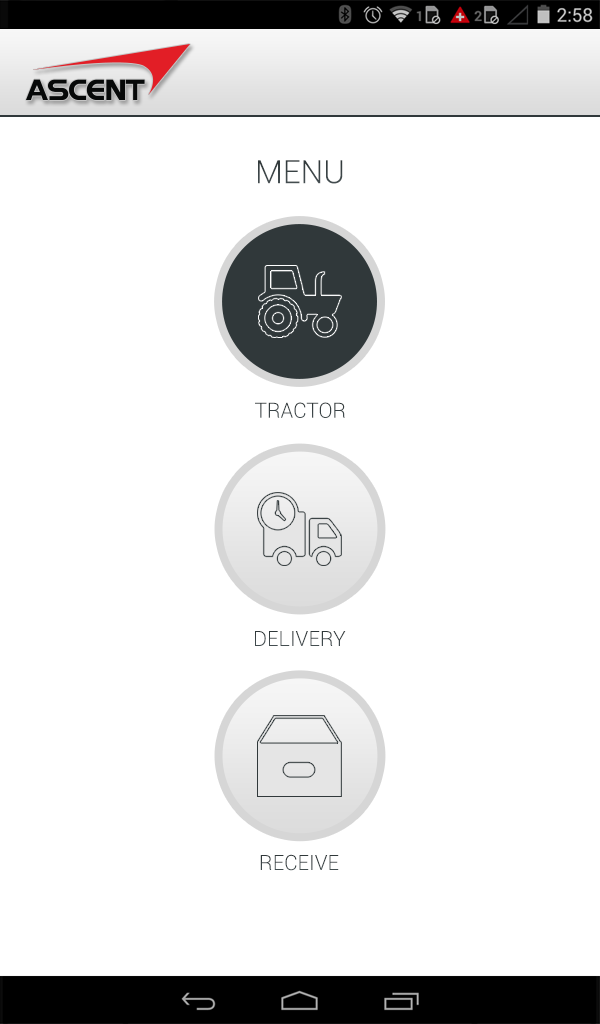
<style>
.page{position:relative;width:600px;height:1024px;background:#ffffff}
.page>*{position:absolute;margin:0}
.t1{font:32px "Roboto-Light";color:#30383a}
.t2{font:21px "Roboto-Light";color:#30383a}
</style>
<div class="page">
<p class="t1" style="left:258px;top:160px;width:85px;height:24px">MENU</p>
<p class="t2" style="left:255px;top:402px;width:90px;height:16px">TRACTOR</p>
<p class="t2" style="left:255px;top:631px;width:91px;height:15px">DELIVERY</p>
<p class="t2" style="left:260px;top:854px;width:79px;height:17px">RECEIVE</p>
</div>
